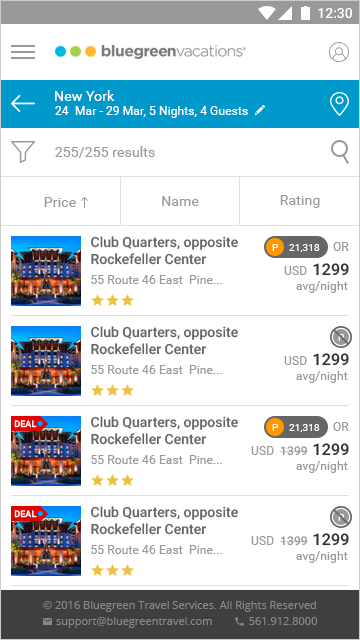
<style>
.page{position:relative;width:360px;height:640px;background:#ffffff}
.page>*{position:absolute;margin:0}
.t1{font:14px "Roboto-Regular";letter-spacing:0.01em;color:#ffffff}
.t2{font:12px "Roboto-Regular";letter-spacing:0.01em;color:#ffffff}
.t3{font:14px "Roboto-Regular";letter-spacing:0.01em;color:#999999}
.t4{font:14px "Roboto-Medium";color:#666666}
.t5{font:10px "Roboto-Regular";letter-spacing:0.01em;color:#ffffff}
.t6{font:12px "Roboto-Regular";letter-spacing:0.01em;color:#999999}
.t7{font:16px "Roboto-Medium";letter-spacing:0.01em;color:#333333}
.t8{font:9px "Roboto-Medium";letter-spacing:0.01em;color:#ffffff}
.t9{font:12px "Roboto-Medium";letter-spacing:0.01em;color:#999999}
</style>
<div class="page">
<p class="t1" style="left:55px;top:90px;width:60px;height:11px">New York</p>
<p class="t2" style="left:55px;top:106px;width:193px;height:12px"><span class="t1"><br></span>24  Mar - 29 Mar, 5 Nights, 4 Guests</p>
<p class="t3" style="left:55px;top:146px;width:100px;height:12px">255/255 results</p>
<p class="t3" style="left:44px;top:197px;width:32px;height:10px">Price</p>
<p class="t3" style="left:162px;top:196px;width:37px;height:10px">Name</p>
<p class="t3" style="left:280px;top:195px;width:40px;height:13px">Rating</p>
<p class="t4" style="left:91px;top:236px;width:147px;height:29px">Club Quarters, opposite <br>Rockefeller Center</p>
<p class="t5" style="left:272px;top:244px;width:7px;height:7px">P</p>
<p class="t5" style="left:289px;top:244px;width:31px;height:8px">21,318</p>
<p class="t6" style="left:333px;top:242px;width:16px;height:9px">OR</p>
<p class="t6" style="left:284px;top:266px;width:23px;height:9px">USD</p>
<p class="t7" style="left:313px;top:263px;width:36px;height:13px">1299</p>
<p class="t6" style="left:91px;top:275px;width:131px;height:9px">55 Route 46 East  Pine...</p>
<p class="t6" style="left:296px;top:281px;width:52px;height:12px">avg/night</p>
<p class="t4" style="left:91px;top:326px;width:147px;height:29px">Club Quarters, opposite <br>Rockefeller Center</p>
<p class="t5" style="left:338px;top:334px;width:7px;height:7px">P</p>
<p class="t7" style="left:313px;top:353px;width:36px;height:13px">1299</p>
<p class="t6" style="left:91px;top:365px;width:131px;height:9px">55 Route 46 East  Pine...</p>
<p class="t6" style="left:284px;top:356px;width:23px;height:9px">USD</p>
<p class="t6" style="left:296px;top:371px;width:52px;height:12px">avg/night</p>
<p class="t8" style="left:14px;top:420px;width:23px;height:8px">DEAL</p>
<p class="t4" style="left:91px;top:416px;width:147px;height:29px">Club Quarters, opposite <br>Rockefeller Center</p>
<p class="t5" style="left:272px;top:424px;width:7px;height:7px">P</p>
<p class="t5" style="left:289px;top:424px;width:31px;height:8px">21,318</p>
<p class="t6" style="left:333px;top:422px;width:16px;height:9px">OR</p>
<p class="t6" style="left:251px;top:446px;width:23px;height:9px">USD</p>
<p class="t9" style="left:280px;top:446px;width:28px;height:10px">1399</p>
<p class="t7" style="left:313px;top:443px;width:36px;height:13px">1299</p>
<p class="t6" style="left:91px;top:455px;width:131px;height:9px">55 Route 46 East  Pine...</p>
<p class="t6" style="left:296px;top:461px;width:52px;height:12px">avg/night</p>
<p class="t8" style="left:14px;top:510px;width:23px;height:8px">DEAL</p>
<p class="t4" style="left:91px;top:506px;width:147px;height:29px">Club Quarters, opposite <br>Rockefeller Center</p>
<p class="t5" style="left:338px;top:514px;width:7px;height:7px">P</p>
<p class="t7" style="left:313px;top:533px;width:36px;height:13px">1299</p>
<p class="t6" style="left:91px;top:545px;width:131px;height:9px">55 Route 46 East  Pine...</p>
<p class="t6" style="left:251px;top:536px;width:23px;height:9px">USD</p>
<p class="t9" style="left:280px;top:536px;width:28px;height:10px">1399</p>
<p class="t6" style="left:296px;top:551px;width:52px;height:12px">avg/night</p>
</div>
